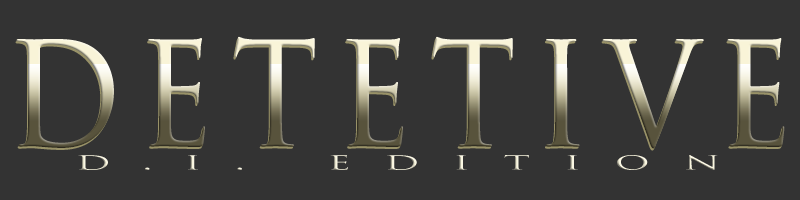
<style>
.page{position:relative;width:800px;height:200px;background:#333333}
.page>*{position:absolute;margin:0}
.t1{font:167px "TrajanPro3-Regular";letter-spacing:0.12em;scale:0.85 1}
.t2{font:22.7px "TrajanPro3-Regular";letter-spacing:0.78em;color:#faf6de;scale:1.92 1}
</style>
<div class="page">
<p class="t1" style="left:16px;top:36px;width:769px;height:113px">detetive</p>
<p class="t2" style="left:78px;top:155px;width:640px;height:15px">d.i. edition</p>
</div>
